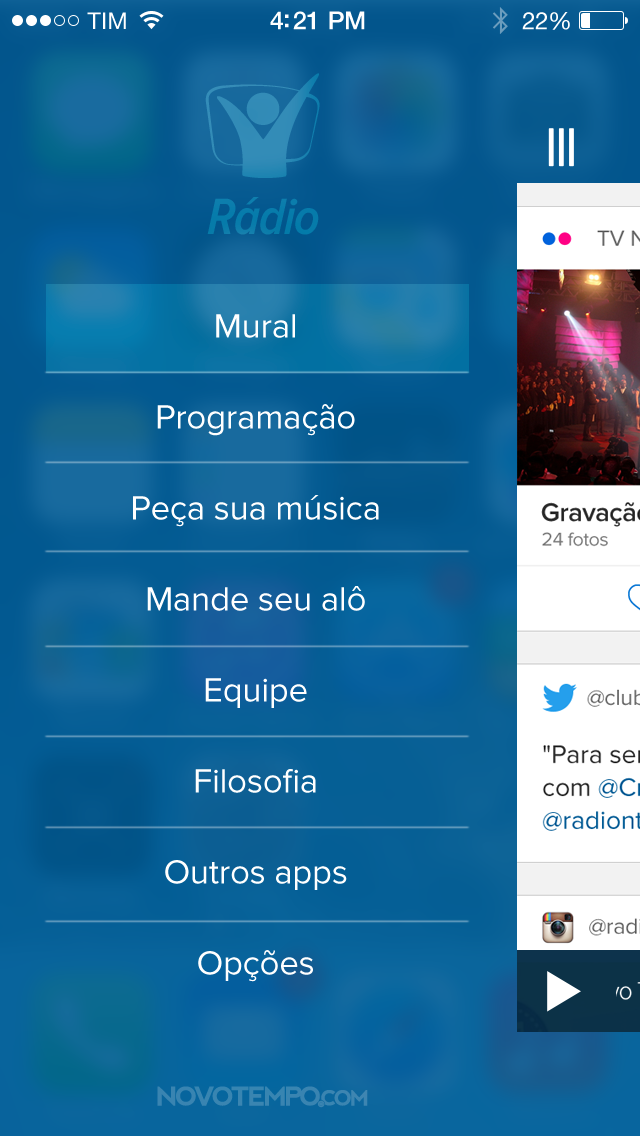
<style>
.page{position:relative;width:640px;height:1136px}
.page>*{position:absolute;margin:0}
.t1{font:52.8px "ProximaNovaCond-SemiboldIt";letter-spacing:-0.02em;color:#067caa}
.t2{font:35px/91px "ProximaNova-Regular";letter-spacing:-0.01em;color:#ffffff}
</style>
<div class="page">
<p class="t1" style="left:207px;top:197px;width:112px;height:38px">Rádio</p>
<p class="t2" style="left:133px;top:314px;width:246px;height:668px;text-align:center">Mural<br>Programação<br>Peça sua música<br>Mande seu alô<br>Equipe<br>Filosofia<br>Outros apps<br>Opções</p>
</div>
